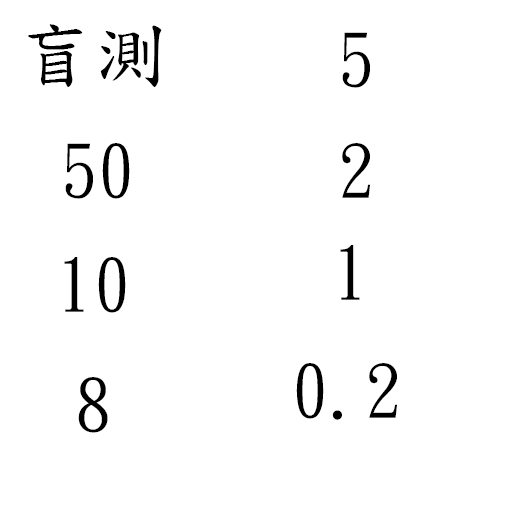
<style>
.page{position:relative;width:512px;height:512px;background:#ffffff}
.page>*{position:absolute;margin:0}
.t1{font:73.4px "DFKaiShu-SB-Estd-BF";color:#000000}
</style>
<div class="page">
<p class="t1" style="left:27px;top:24px;width:135px;height:63px">盲測</p>
<p class="t1" style="left:342px;top:32px;width:28px;height:56px">5</p>
<p class="t1" style="left:65px;top:143px;width:65px;height:56px">50</p>
<p class="t1" style="left:342px;top:143px;width:28px;height:55px">2</p>
<p class="t1" style="left:340px;top:245px;width:20px;height:55px">1</p>
<p class="t1" style="left:64px;top:257px;width:62px;height:56px">10</p>
<p class="t1" style="left:296px;top:363px;width:101px;height:57px">0.2</p>
<p class="t1" style="left:78px;top:377px;width:30px;height:56px">8</p>
</div>
